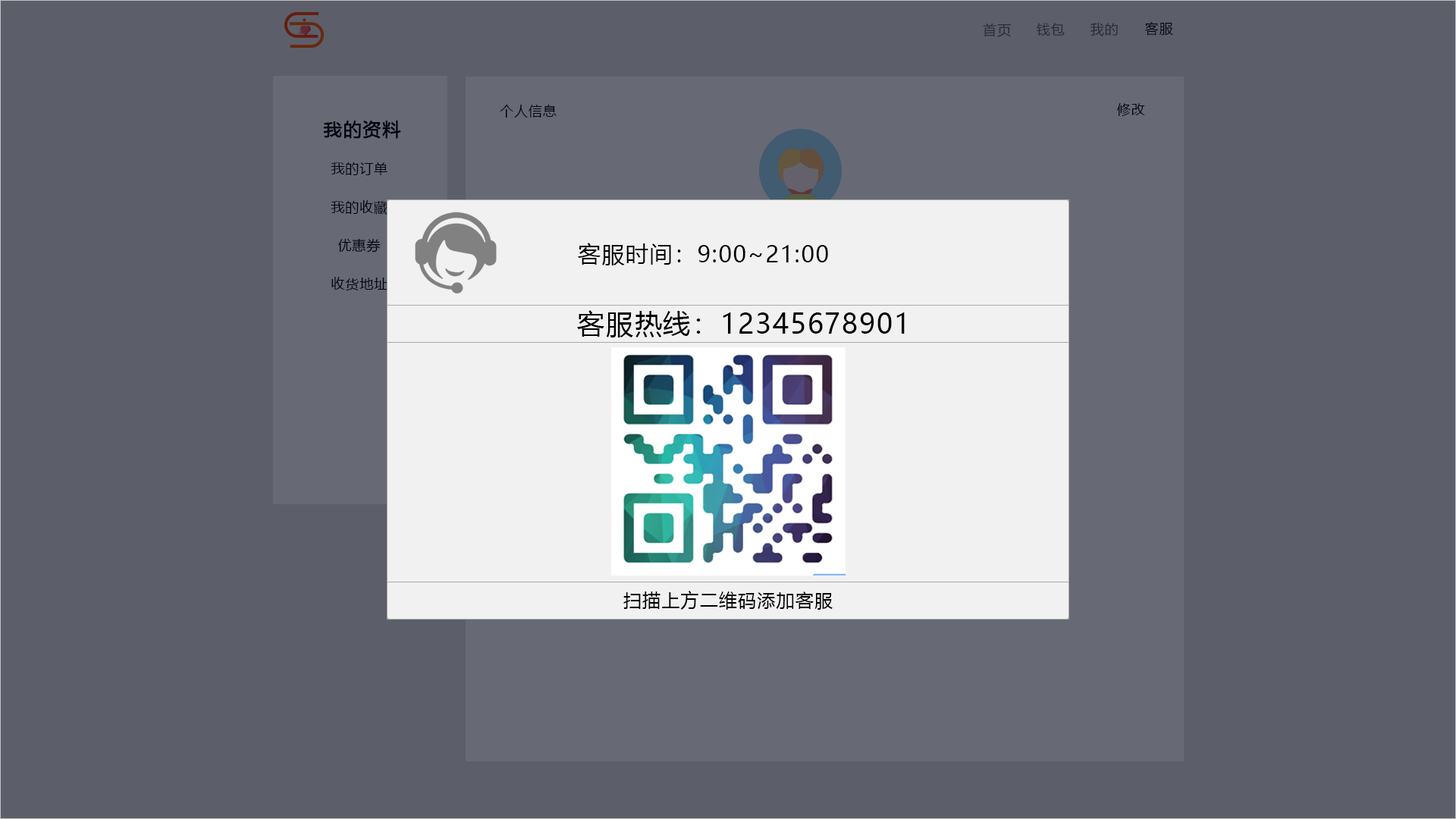
<style>
.page{position:relative;width:1456px;height:819px;background:#5c5f69}
.page>*{position:absolute;margin:0}
.t1{font:13.6px "MicrosoftYaHei";letter-spacing:0.06em;color:#282b35}
.t2{font:13.6px "MicrosoftYaHei";letter-spacing:0.06em;color:#01040b}
.t3{font:13.6px "MicrosoftYaHeiUI";letter-spacing:0.05em;color:#000000}
.t4{font:18.2px "MicrosoftYaHeiUI";letter-spacing:0.05em;color:#000000;font-weight:bold}
.t5{font:22.7px "MicrosoftYaHeiUI";letter-spacing:0.05em;color:#000000}
.t6{font:27.3px "MicrosoftYaHeiUI";letter-spacing:0.05em;color:#000000}
.t7{font:18.2px "MicrosoftYaHeiUI";letter-spacing:0.05em;color:#000000}
</style>
<div class="page">
<p class="t1" style="left:983px;top:23px;width:28px;height:14px">首页</p>
<p class="t1" style="left:1037px;top:23px;width:28px;height:13px">钱包</p>
<p class="t1" style="left:1090px;top:23px;width:28px;height:13px">我的</p>
<p class="t2" style="left:1145px;top:21px;width:28px;height:15px">客服</p>
<p class="t3" style="left:500px;top:105px;width:57px;height:13px">个人信息</p>
<p class="t3" style="left:1117px;top:103px;width:28px;height:13px">修改</p>
<p class="t4" style="left:323px;top:121px;width:78px;height:18px">我的资料</p>
<p class="t3" style="left:331px;top:162px;width:57px;height:13px">我的订单</p>
<p class="t3" style="left:331px;top:200px;width:57px;height:15px">我的收藏</p>
<p class="t3" style="left:337px;top:238px;width:44px;height:15px">优惠券</p>
<p class="t5" style="left:578px;top:243px;width:250px;height:22px">客服时间：9:00~21:00</p>
<p class="t3" style="left:331px;top:277px;width:57px;height:13px">收货地址</p>
<p class="t6" style="left:577px;top:310px;width:328px;height:27px">客服热线：12345678901</p>
<p class="t7" style="left:623px;top:591px;width:210px;height:19px">扫描上方二维码添加客服</p>
</div>
